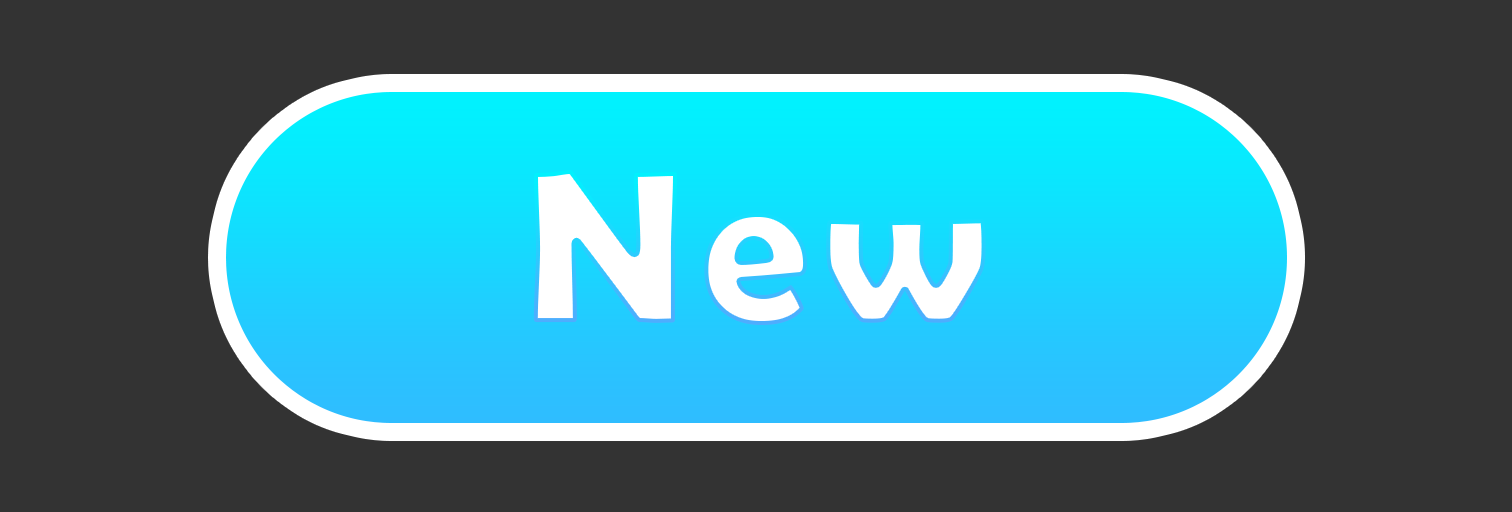
<style>
.page{position:relative;width:1512px;height:512px;background:#333333}
.page>*{position:absolute;margin:0}
.t1{font:218.9px "BerlinSansFBDemi-Bold";letter-spacing:0.06em;color:#ffffff}
</style>
<div class="page">
<p class="t1" style="left:533px;top:170px;width:453px;height:155px">New</p>
</div>
